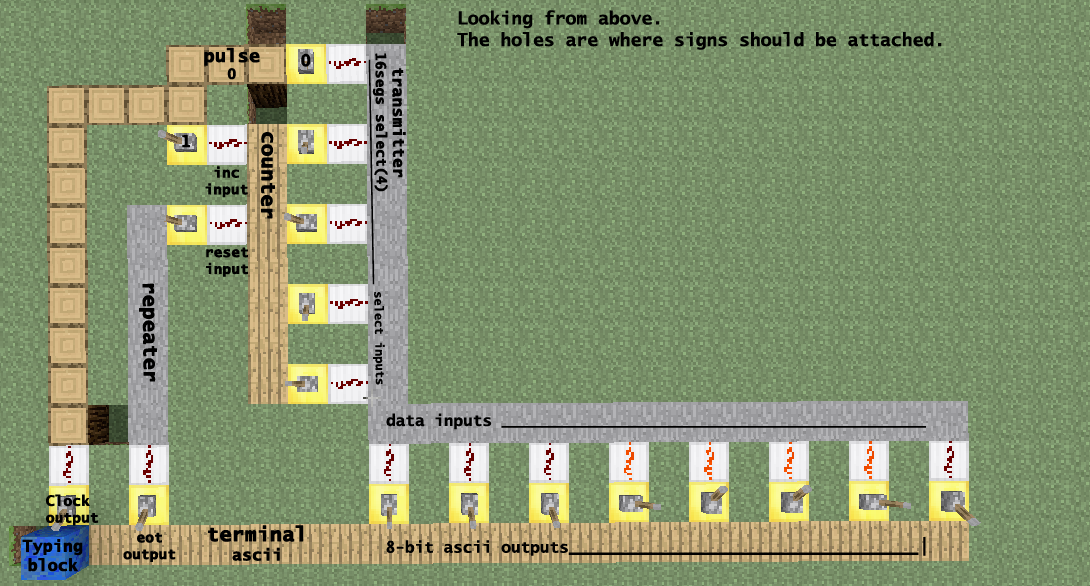
<style>
.page{position:relative;width:1090px;height:586px}
.page>*{position:absolute;margin:0}
.t1{font:18px "LucidaSans-TypewriterBold";color:#000000}
.t2{font:18px "LucidaSans-TypewriterBold";color:#000000;font-weight:bold}
.t3{font:14px "LucidaSans-TypewriterBold";color:#000000;font-weight:bold}
.t4{font:16px "LucidaSans-TypewriterBold";color:#000000;font-weight:bold}
.t5{font:12px "LucidaSans-TypewriterBold";color:#000000}
.t6{font:20px "LucidaSans-TypewriterBold";color:#000000;font-weight:bold}
.t7{font:16px "LucidaSans-TypewriterBold";color:#000000}
.t8{font:20px "LucidaSans-TypewriterBold";color:#000000}
</style>
<div class="page">
<p class="t1" style="left:457px;top:10px;width:485px;height:40px">Looking from above.<br>The holes are where signs should be attached.</p>
<p class="t2" style="left:204px;top:47px;width:56px;height:33px;text-align:center">pulse<br><span class="t3">0</span></p>
<p class="t4" style="left:301px;top:53px;width:10px;height:14px">0</p>
<p class="t3" style="left:372px;top:53px;width:34px;height:139px;text-align:center;rotate:90deg"><span class="t4">transmitter<br></span>16segs select(4)</p>
<p class="t5" style="left:368px;top:59px;width:17px;height:326px;rotate:89deg">_______________________________ select inputs</p>
<p class="t4" style="left:182px;top:134px;width:8px;height:14px">1</p>
<p class="t6" style="left:260px;top:132px;width:15px;height:87px;rotate:90deg">counter</p>
<p class="t3" style="left:205px;top:166px;width:43px;height:32px;text-align:center">inc<br>input</p>
<p class="t3" style="left:206px;top:247px;width:42px;height:30px;text-align:center">reset<br>input</p>
<p class="t6" style="left:139px;top:283px;width:18px;height:99px;rotate:89deg">repeater</p>
<p class="t7" style="left:386px;top:413px;width:540px;height:17px">data inputs ____________________________________________</p>
<p class="t3" style="left:46px;top:494px;width:52px;height:32px">Clock<br>output</p>
<p class="t3" style="left:123px;top:532px;width:53px;height:30px;text-align:center">eot<br>output</p>
<p class="t6" style="left:208px;top:525px;width:96px;height:36px;text-align:center">terminal<br><span class="t4">ascii</span></p>
<p class="t4" style="left:22px;top:539px;width:61px;height:33px;text-align:center">Typing<br>block</p>
<p class="t8" style="left:386px;top:537px;width:540px;height:19px"><span class="t7">8-bit ascii outputs</span>_____________________________|</p>
</div>
